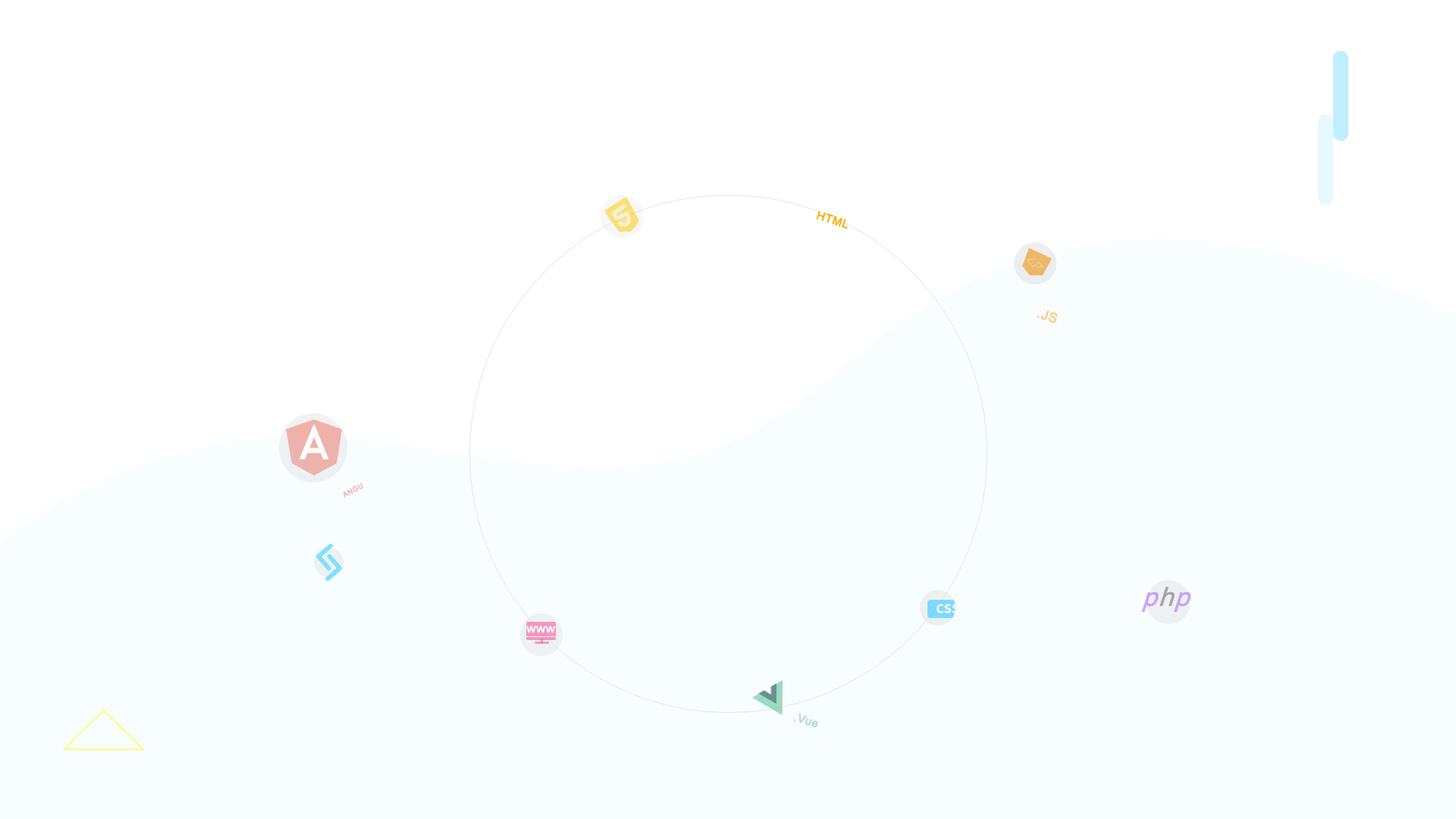
<style>
.page{position:relative;width:1456px;height:819px;background:#f8fdff}
.page>*{position:absolute;margin:0}
.t1{font:11.5px "ArialMT";letter-spacing:0.025em;color:#fab114;font-weight:bold}
.t2{font:13.2px "ArialMT";letter-spacing:0.025em;color:#f9cc81;font-weight:bold}
.t3{font:42.4px "DotcomBold-Regular";letter-spacing:0.025em;color:#fcfcfc;font-weight:bold}
.t4{font:7.2px "ArialMT";letter-spacing:0.025em;color:#f2b3ae;font-weight:bold}
.t5{font:25.5px "OpenSans";letter-spacing:0.025em;font-weight:bold;scale:0.95 1}
.t6{font:15.1px "OpenSans";letter-spacing:0.025em;color:#fcfcfc;font-weight:bold}
.t7{font:11.6px "OpenSans";letter-spacing:0.025em;color:#f8fdff;font-weight:bold}
.t8{font:11.5px "ArialMT";letter-spacing:0.025em;color:#acddc7;font-weight:bold}
</style>
<div class="page">
<p class="t1" style="left:816px;top:211px;width:32px;height:18px;rotate:17deg">HTML</p>
<p class="t2" style="left:1037px;top:310px;width:21px;height:13px;rotate:17deg">.JS</p>
<p class="t3" style="left:300px;top:425px;width:28px;height:35px">A</p>
<p class="t4" style="left:344px;top:482px;width:19px;height:16px;rotate:-28deg">ANGU</p>
<p class="t5" style="left:1141px;top:586px;width:50px;height:26px">php</p>
<p class="t6" style="left:937px;top:604px;width:22px;height:9px">css</p>
<p class="t7" style="left:526px;top:626px;width:29px;height:7px">www</p>
<p class="t8" style="left:793px;top:713px;width:25px;height:14px;rotate:17deg">.Vue</p>
</div>
